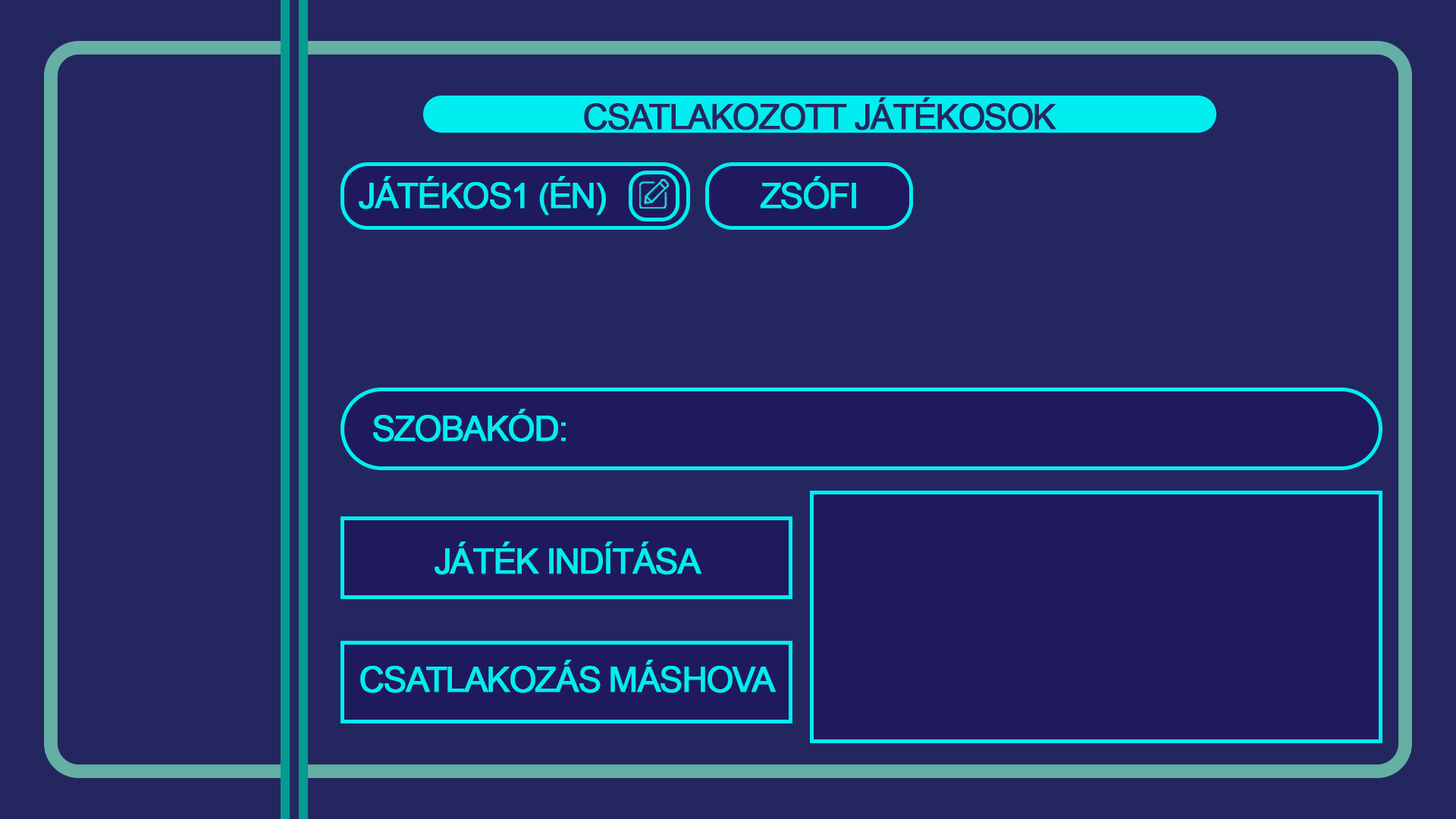
<style>
.page{position:relative;width:1456px;height:819px;background:#24275f}
.page>*{position:absolute;margin:0}
.t1{font:35.2px "ArialMT";letter-spacing:-0.06em;color:#24275f;font-weight:bold}
.t2{font:35.2px "ArialMT";letter-spacing:-0.06em;color:#00eef0;font-weight:bold}
</style>
<div class="page">
<p class="t1" style="left:584px;top:97px;width:472px;height:33px">CSATLAKOZOTT JÁTÉKOSOK</p>
<p class="t2" style="left:359px;top:176px;width:247px;height:39px">JÁTÉKOS1 (ÉN)</p>
<p class="t2" style="left:760px;top:176px;width:96px;height:33px">ZSÓFI</p>
<p class="t2" style="left:373px;top:409px;width:193px;height:33px">SZOBAKÓD:</p>
<p class="t2" style="left:435px;top:541px;width:266px;height:34px">JÁTÉK INDÍTÁSA</p>
<p class="t2" style="left:360px;top:660px;width:416px;height:33px">CSATLAKOZÁS MÁSHOVA</p>
</div>
